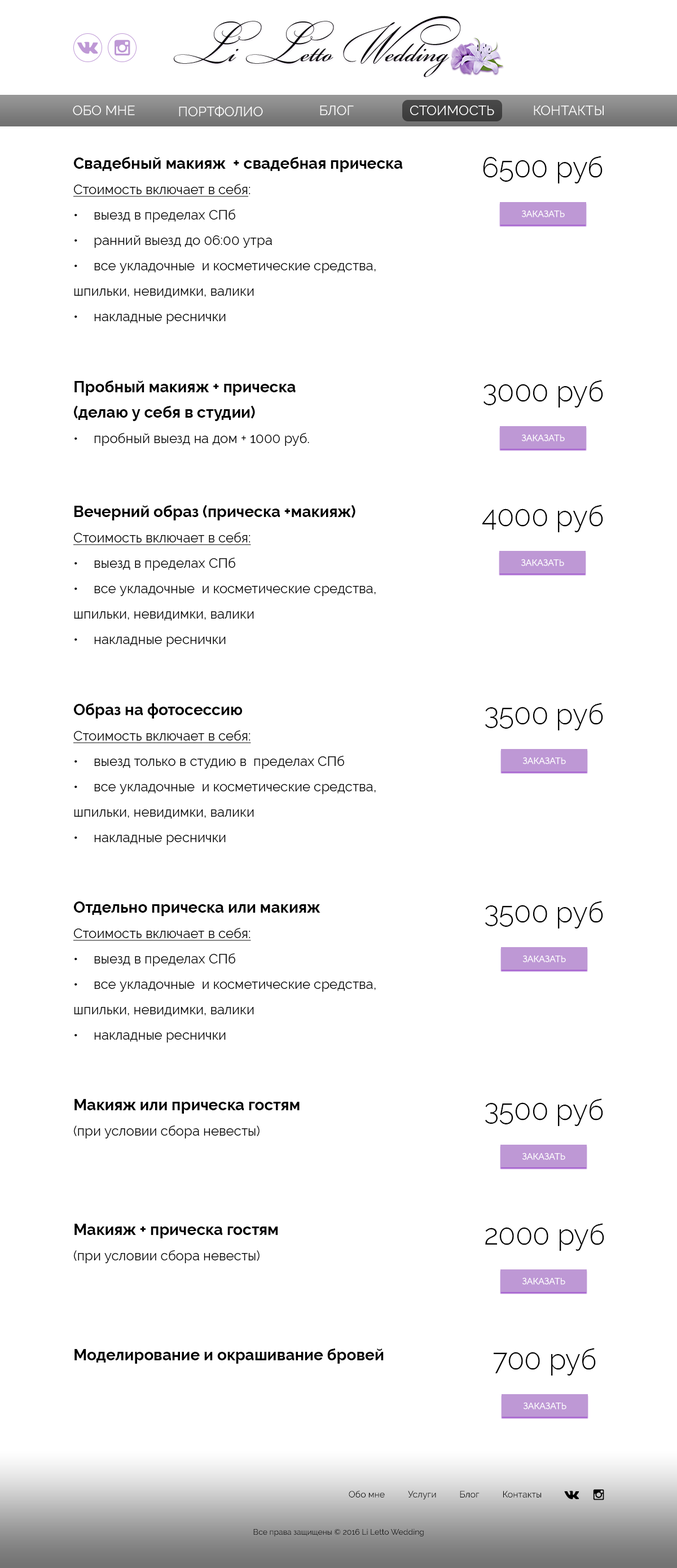
<style>
.page{position:relative;width:677px;height:1568px;background:#ffffff}
.page>*{position:absolute;margin:0}
.t1{font:13.5px "Raleway-Regular";color:#ffffff;text-transform:uppercase}
.t2{font:13.5px/25.4px "Raleway-Regular";color:#000000}
.t3{font:15.8px/25.4px "Raleway-Bold";color:#000000}
.t4{font:13.5px/25.4px "Raleway-Regular";color:#000000;text-decoration:underline}
.t5{font:28.2px "Raleway-Light";color:#000000}
.t6{font:9px "Raleway-Regular";color:#ffffff}
.t7{font:13.5px/25.4px "Raleway-Bold";color:#000000}
.t8{font:15.8px "Raleway-Bold";color:#000000}
.t9{font:9px "Raleway-Regular";color:#000000}
.t10{font:7.9px "Raleway-Regular";color:#000000}
</style>
<div class="page">
<p class="t1" style="left:73px;top:106px;width:62px;height:9px">Обо мне</p>
<p class="t1" style="left:179px;top:106px;width:84px;height:11px">портфолио</p>
<p class="t1" style="left:320px;top:106px;width:34px;height:9px">Блог</p>
<p class="t1" style="left:410px;top:106px;width:84px;height:9px">стоимость</p>
<p class="t1" style="left:534px;top:106px;width:70px;height:9px">Контакты</p>
<p class="t2" style="left:73px;top:157px;width:330px;height:167px"><span class="t3">Свадебный макияж  + свадебная прическа<br></span><span class="t4">Стоимость включает в себя</span>:<br>• выезд в пределах СПб<br>• ранний выезд до 06:00 утра<br>• все укладочные  и косметические средства,<br>шпильки, невидимки, валики<br>• накладные реснички</p>
<p class="t5" style="left:483px;top:156px;width:120px;height:27px">6500 руб</p>
<p class="t6" style="left:522px;top:210px;width:43px;height:7px">ЗАКАЗАТЬ</p>
<p class="t3" style="left:74px;top:380px;width:235px;height:66px">Пробный макияж + прическа <br>(делаю у себя в студии)<br><span class="t2">• пробный выезд на дом + 1000 руб.</span></p>
<p class="t5" style="left:484px;top:380px;width:119px;height:28px">3000 руб</p>
<p class="t6" style="left:522px;top:434px;width:43px;height:7px">ЗАКАЗАТЬ</p>
<p class="t2" style="left:73px;top:505px;width:303px;height:142px"><span class="t3">Вечерний образ (прическа +макияж)<br></span><span class="t4">Стоимость включает в себя:<br></span>• выезд в пределах СПб<br>• все укладочные  и косметические средства,<br>шпильки, невидимки, валики<br>• накладные реснички</p>
<p class="t5" style="left:483px;top:505px;width:120px;height:27px">4000 руб</p>
<p class="t6" style="left:521px;top:559px;width:43px;height:7px">ЗАКАЗАТЬ</p>
<p class="t2" style="left:73px;top:703px;width:303px;height:142px"><span class="t3">Образ на фотосессию<br></span><span class="t4">Стоимость включает в себя:<br></span>• выезд только в студию в  пределах СПб <br>• все укладочные  и косметические средства,<br>шпильки, невидимки, валики<br>• накладные реснички</p>
<p class="t5" style="left:485px;top:703px;width:118px;height:27px">3500 руб</p>
<p class="t6" style="left:523px;top:757px;width:43px;height:7px">ЗАКАЗАТЬ</p>
<p class="t2" style="left:73px;top:901px;width:303px;height:142px"><span class="t3">Отдельно прическа или макияж</span><span class="t7"><br></span><span class="t4">Стоимость включает в себя:<br></span>• выезд в пределах СПб<br>• все укладочные  и косметические средства,<br>шпильки, невидимки, валики<br>• накладные реснички</p>
<p class="t5" style="left:485px;top:901px;width:118px;height:27px">3500 руб</p>
<p class="t6" style="left:523px;top:955px;width:43px;height:7px">ЗАКАЗАТЬ</p>
<p class="t2" style="left:73px;top:1099px;width:227px;height:39px"><span class="t3">Макияж или прическа гостям<br></span>(при условии сбора невесты)</p>
<p class="t5" style="left:485px;top:1098px;width:118px;height:28px">3500 руб</p>
<p class="t6" style="left:522px;top:1153px;width:44px;height:7px">ЗАКАЗАТЬ</p>
<p class="t2" style="left:73px;top:1224px;width:205px;height:39px"><span class="t3">Макияж + прическа гостям<br></span>(при условии сбора невесты)</p>
<p class="t5" style="left:485px;top:1223px;width:120px;height:28px">2000 руб</p>
<p class="t6" style="left:522px;top:1277px;width:44px;height:8px">ЗАКАЗАТЬ</p>
<p class="t8" style="left:75px;top:1348px;width:309px;height:16px">Моделирование и окрашивание бровей</p>
<p class="t5" style="left:494px;top:1348px;width:102px;height:28px">700 руб</p>
<p class="t6" style="left:523px;top:1402px;width:44px;height:7px">ЗАКАЗАТЬ</p>
<p class="t9" style="left:349px;top:1491px;width:192px;height:9px">Обо мне          Услуги          Блог          Контакты</p>
<p class="t10" style="left:253px;top:1528px;width:171px;height:8px">Все права защищены © 2016 Li Letto Wedding</p>
</div>
